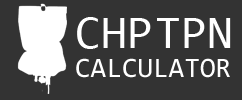
<style>
.page{position:relative;width:242px;height:100px;background:#333333}
.page>*{position:absolute;margin:0}
.t1{font:46.6px "Consolas";color:#ffffff}
.t2{font:28.4px "Consolas";color:#ffffff}
</style>
<div class="page">
<p class="t1" style="left:77px;top:17px;width:74px;height:32px">CHP</p>
<p class="t1" style="left:157px;top:18px;width:74px;height:30px">TPN</p>
<p class="t2" style="left:76px;top:58px;width:154px;height:20px">CALCULATOR</p>
</div>
